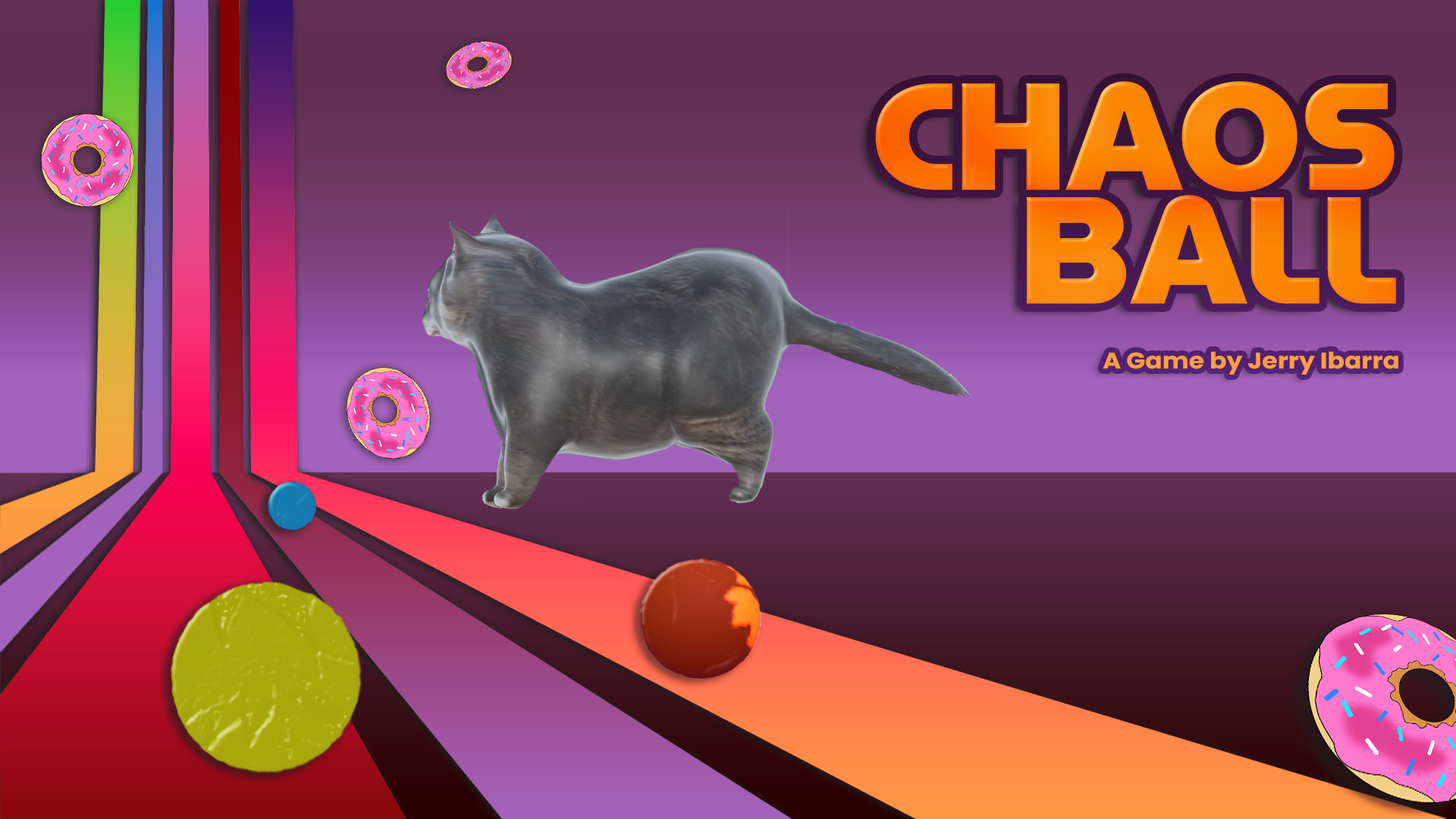
<style>
.page{position:relative;width:1456px;height:819px}
.page>*{position:absolute;margin:0}
.t1{font:151.7px/113.7px "MuseoModerno-Black";color:#fb8200;text-transform:uppercase}
.t2{font:22.7px "Poppins-Bold";color:#f49343;scale:1.1 1}
</style>
<div class="page">
<p class="t1" style="left:875px;top:81px;width:521px;height:223px;text-align:right">CHAOS<br>BALL</p>
<p class="t2" style="left:1103px;top:351px;width:295px;height:24px">A Game by Jerry Ibarra</p>
</div>
